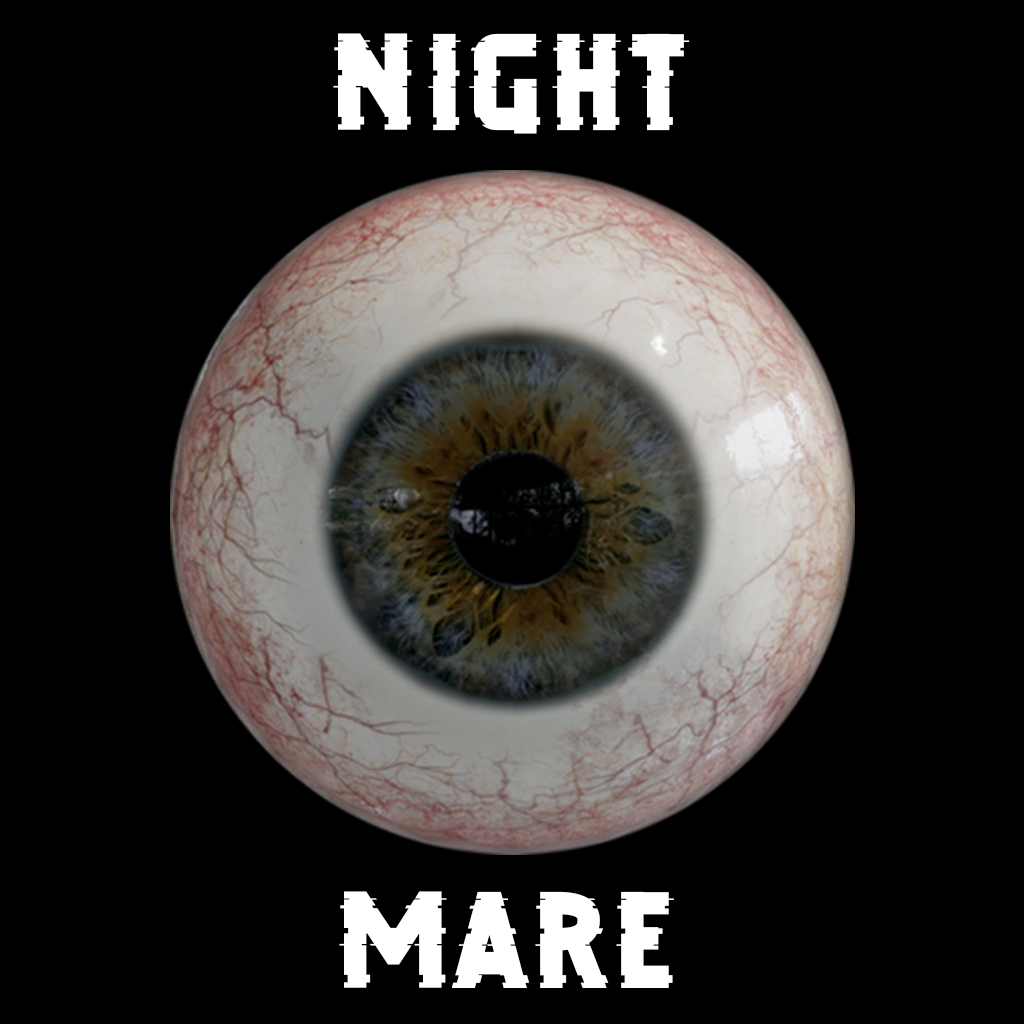
<style>
.page{position:relative;width:1024px;height:1024px;background:#000000}
.page>*{position:absolute;margin:0}
.t1{font:200px "DEBUGFREETRIAL";color:#ffffff}
</style>
<div class="page">
<p class="t1" style="left:333px;top:33px;width:357px;height:101px">Night</p>
<p class="t1" style="left:339px;top:891px;width:335px;height:97px">Mare</p>
</div>
